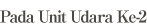
<style>
.page{position:relative;width:147px;height:27px;background:#ffffff}
.page>*{position:absolute;margin:0}
.t1{font:16.5px "RyuminPro-ExBold";letter-spacing:-0.08em;color:#4c4843}
</style>
<div class="page">
<p class="t1" style="left:0px;top:10px;width:147px;height:13px">Pada Unit Udara Ke-2</p>
</div>
